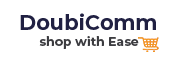
<style>
.page{position:relative;width:171px;height:61px;background:#ffffff}
.page>*{position:absolute;margin:0}
.t1{font:20.8px "Montserrat-Bold";color:#202042}
.t2{font:12.5px "Montserrat-Bold";color:#3c3c40}
</style>
<div class="page">
<p class="t1" style="left:20px;top:13px;width:136px;height:17px">DoubiComm</p>
<p class="t2" style="left:39px;top:36px;width:100px;height:13px">shop with Ease</p>
</div>
